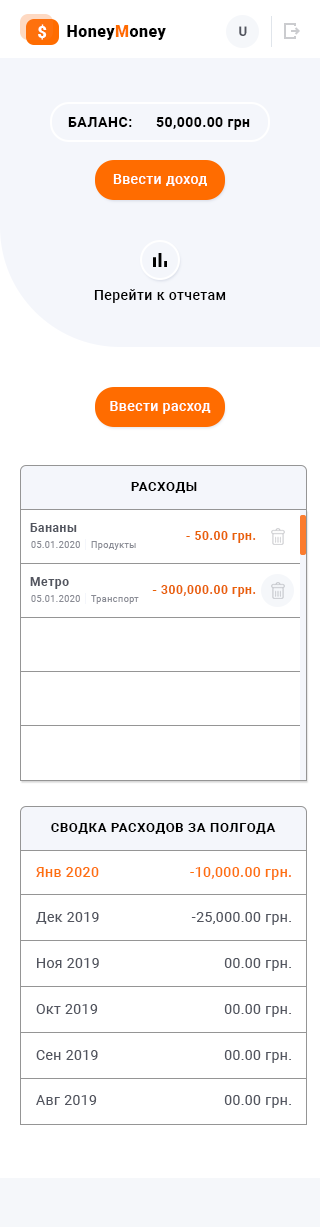
<style>
.page{position:relative;width:320px;height:1227px;background:#ffffff}
.page>*{position:absolute;margin:0}
.t1{font:16px "Roboto-Black";letter-spacing:0.03em;color:#ffffff}
.t2{font:16px "Roboto-Black";letter-spacing:0.03em;color:#000000}
.t3{font:16px "Roboto-Black";letter-spacing:0.03em;color:#ff6c00}
.t4{font:13px "Roboto-Medium";letter-spacing:0.035em;color:#52555f}
.t5{font:14px "Roboto-Bold";letter-spacing:0.04em;color:#000000;text-transform:uppercase}
.t6{font:14px "Roboto-Bold";letter-spacing:0.03em;color:#000000}
.t7{font:14px "Roboto-Medium";letter-spacing:0.03em;color:#ffffff}
.t8{font:14px "Roboto-Medium";letter-spacing:0.03em;color:#000000}
.t9{font:13px "Roboto-Bold";letter-spacing:0.05em;color:#000000;text-transform:uppercase}
.t10{font:12px "Roboto-Bold";letter-spacing:0.05em;color:#52555f}
.t11{font:12px "Roboto-Bold";letter-spacing:0.05em;color:#e96105}
.t12{font:9px "Roboto-Regular";letter-spacing:0.05em;color:#8a8c95}
.t13{font:14px "Roboto-Medium";letter-spacing:0.03em;color:#fe710d}
.t14{font:14px "Roboto-Regular";letter-spacing:0.03em;color:#52555f}
</style>
<div class="page">
<p class="t1" style="left:38px;top:24px;width:9px;height:16px">$</p>
<p class="t2" style="left:67px;top:25px;width:99px;height:15px">Honey<span class="t3">M</span>oney</p>
<p class="t4" style="left:239px;top:26px;width:8px;height:10px">U</p>
<p class="t5" style="left:68px;top:117px;width:64px;height:10px">баланс:</p>
<p class="t6" style="left:156px;top:117px;width:94px;height:13px">50,000.00 грн</p>
<p class="t7" style="left:113px;top:174px;width:94px;height:12px">Ввести доход</p>
<p class="t8" style="left:94px;top:289px;width:132px;height:14px">Перейти к отчетам</p>
<p class="t7" style="left:110px;top:401px;width:101px;height:13px">Ввести расход</p>
<p class="t9" style="left:131px;top:482px;width:66px;height:11px">Расходы</p>
<p class="t10" style="left:30px;top:523px;width:47px;height:9px">Бананы</p>
<p class="t11" style="left:186px;top:531px;width:70px;height:12px">- 50.00 грн.</p>
<p class="t12" style="left:31px;top:541px;width:49px;height:7px">05.01.2020</p>
<p class="t12" style="left:91px;top:541px;width:45px;height:9px">Продукты</p>
<p class="t10" style="left:30px;top:577px;width:39px;height:12px">Метро</p>
<p class="t11" style="left:152px;top:585px;width:104px;height:12px">- 300,000.00 грн.</p>
<p class="t12" style="left:31px;top:595px;width:49px;height:7px">05.01.2020</p>
<p class="t12" style="left:91px;top:595px;width:48px;height:9px">Транспорт</p>
<p class="t9" style="left:51px;top:823px;width:225px;height:11px">Сводка расходов за полгода</p>
<p class="t13" style="left:36px;top:867px;width:63px;height:10px">Янв 2020</p>
<p class="t13" style="left:190px;top:867px;width:101px;height:13px">-10,000.00 грн.</p>
<p class="t14" style="left:36px;top:912px;width:63px;height:12px">Дек 2019</p>
<p class="t14" style="left:191px;top:912px;width:100px;height:13px">-25,000.00 грн.</p>
<p class="t14" style="left:37px;top:958px;width:62px;height:10px">Ноя 2019</p>
<p class="t14" style="left:224px;top:958px;width:67px;height:13px">00.00 грн.</p>
<p class="t14" style="left:36px;top:1004px;width:62px;height:10px">Окт 2019</p>
<p class="t14" style="left:224px;top:1004px;width:67px;height:13px">00.00 грн.</p>
<p class="t14" style="left:36px;top:1050px;width:62px;height:10px">Сен 2019</p>
<p class="t14" style="left:224px;top:1050px;width:67px;height:13px">00.00 грн.</p>
<p class="t14" style="left:36px;top:1095px;width:61px;height:10px">Авг 2019</p>
<p class="t14" style="left:224px;top:1095px;width:67px;height:13px">00.00 грн.</p>
</div>
